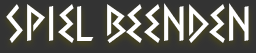
<style>
.page{position:relative;width:256px;height:53px;background:#333333}
.page>*{position:absolute;margin:0}
.t1{font:50px "Xtra";color:#ffffff}
</style>
<div class="page">
<p class="t1" style="left:6px;top:3px;width:243px;height:40px">Spiel Beenden</p>
</div>
